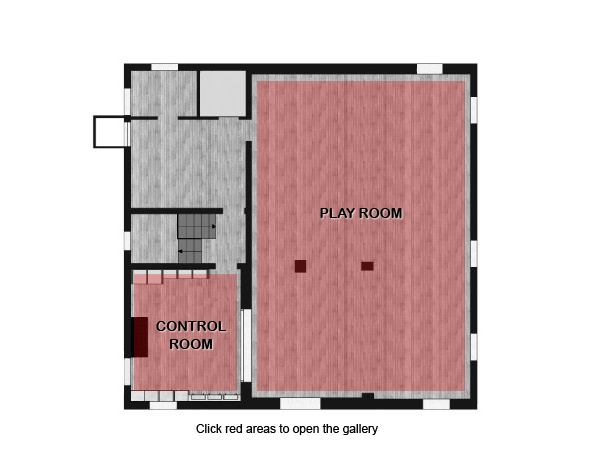
<style>
.page{position:relative;width:597px;height:462px;background:#ffffff}
.page>*{position:absolute;margin:0}
.t1{font:14px "ArialRoundedMTBold";color:#000000}
.t2{font:14px/18.2px "ArialRoundedMTBold";color:#000000}
.t3{font:12px "ArialMT";color:#000000}
</style>
<div class="page">
<p class="t1" style="left:320px;top:208px;width:82px;height:10px">PLAY ROOM</p>
<p class="t2" style="left:156px;top:321px;width:70px;height:28px;text-align:center">CONTROL<br>ROOM</p>
<p class="t3" style="left:196px;top:424px;width:182px;height:11px">Click red areas to open the gallery</p>
</div>
